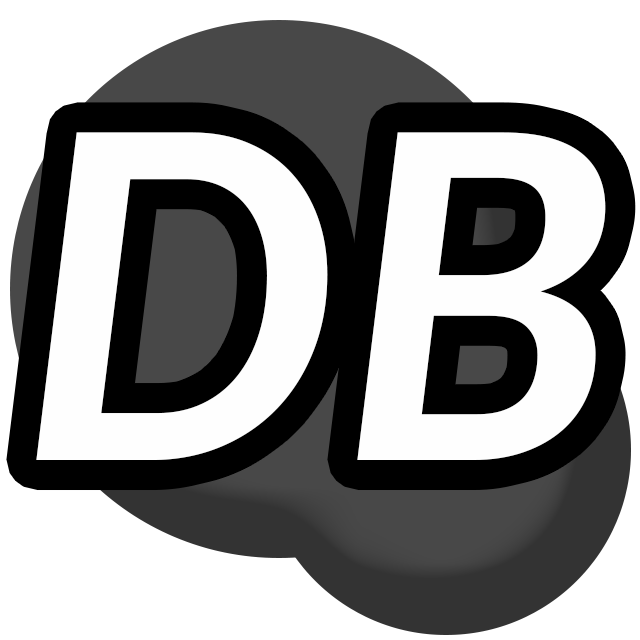
<style>
.page{position:relative;width:640px;height:640px;background:#ffffff}
.page>*{position:absolute;margin:0}
.t1{font:452.7px "Lato-BoldItalic";color:#fefefe}
</style>
<div class="page">
<p class="t1" style="left:36px;top:132px;width:570px;height:328px">DB</p>
</div>
